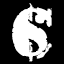
<style>
.page{position:relative;width:64px;height:64px;background:#000000}
.page>*{position:absolute;margin:0}
.t1{font:92px "ARMYRUST";color:#ffffff}
.t2{font:94.6px "ARMYRUST";color:#ffffff}
</style>
<div class="page">
<p class="t1" style="left:15px;top:3px;width:33px;height:59px">$</p>
<p class="t2" style="left:12px;top:7px;width:40px;height:52px">C</p>
</div>
